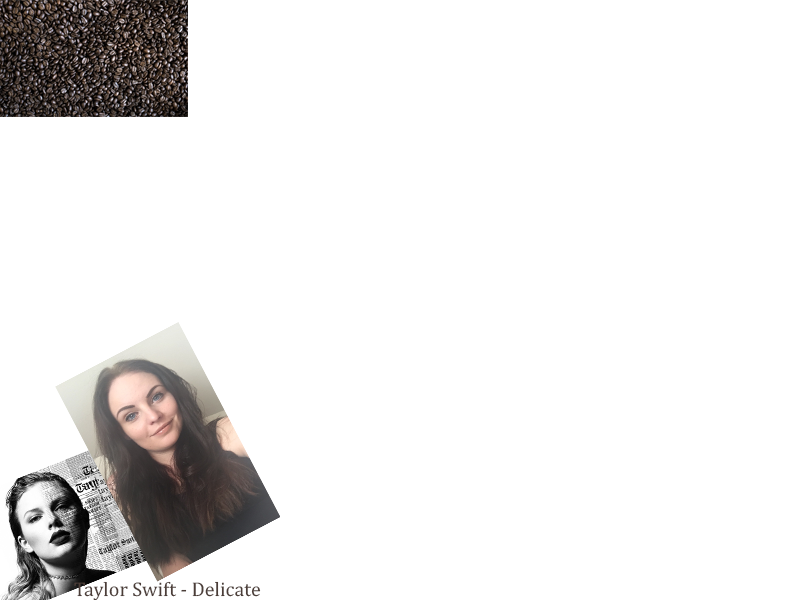
<style>
.page{position:relative;width:800px;height:600px;background:#ffffff}
.page>*{position:absolute;margin:0}
.t1{font:20.1px "Cambria";color:#4b3d38}
</style>
<div class="page">
<p class="t1" style="left:74px;top:581px;width:187px;height:20px">Taylor Swift - Delicate</p>
</div>
